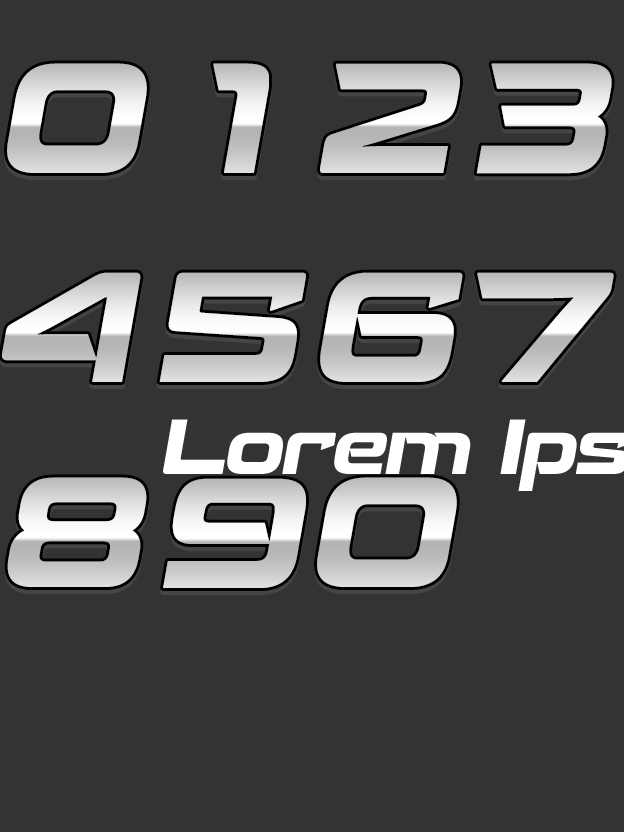
<style>
.page{position:relative;width:624px;height:832px;background:#333333}
.page>*{position:absolute;margin:0}
.t1{font:150px "RechargeRg-Bold";letter-spacing:-0.02em;font-style:italic}
.t2{font:150px "RechargeRg-Bold";letter-spacing:-0.02em;color:#cfcfcf;font-style:italic}
.t3{font:150px "RechargeRg-Bold";letter-spacing:-0.02em;color:#cecece;font-style:italic}
</style>
<div class="page">
<p class="t1" style="left:7px;top:63px;width:140px;height:110px">0</p>
<p class="t1" style="left:7px;top:64px;width:140px;height:110px">0</p>
<p class="t1" style="left:213px;top:63px;width:56px;height:110px">1</p>
<p class="t1" style="left:213px;top:64px;width:56px;height:110px">1</p>
<p class="t2" style="left:320px;top:63px;width:140px;height:110px">2</p>
<p class="t3" style="left:320px;top:64px;width:140px;height:110px">2</p>
<p class="t1" style="left:476px;top:63px;width:136px;height:111px">3</p>
<p class="t1" style="left:476px;top:64px;width:136px;height:111px">3</p>
<p class="t1" style="left:2px;top:272px;width:139px;height:110px">4</p>
<p class="t1" style="left:2px;top:273px;width:139px;height:110px">4</p>
<p class="t1" style="left:159px;top:272px;width:147px;height:110px">5</p>
<p class="t1" style="left:159px;top:273px;width:147px;height:110px">5</p>
<p class="t1" style="left:320px;top:272px;width:143px;height:110px">6</p>
<p class="t1" style="left:320px;top:273px;width:143px;height:110px">6</p>
<p class="t1" style="left:477px;top:272px;width:137px;height:110px">7</p>
<p class="t1" style="left:477px;top:272px;width:137px;height:110px">7</p>
<p class="t1" style="left:7px;top:477px;width:140px;height:110px">8</p>
<p class="t1" style="left:7px;top:476px;width:140px;height:110px">8</p>
<p class="t1" style="left:163px;top:478px;width:143px;height:110px">9</p>
<p class="t1" style="left:163px;top:476px;width:143px;height:110px">9</p>
<p class="t1" style="left:317px;top:477px;width:140px;height:110px">0</p>
<p class="t1" style="left:317px;top:476px;width:140px;height:110px">0</p>
</div>
